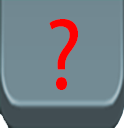
<style>
.page{position:relative;width:124px;height:128px;background:#738b94}
.page>*{position:absolute;margin:0}
.t1{font:102.4px "MyriadPro-Regular";color:#ff0000;scale:0.89 1}
</style>
<div class="page">
<p class="t1" style="left:49px;top:19px;width:29px;height:71px">?</p>
</div>
